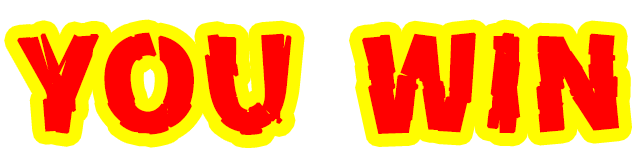
<style>
.page{position:relative;width:642px;height:156px;background:#ffffff}
.page>*{position:absolute;margin:0}
.t1{font:125px "ZeroGothic";color:#ff0000;font-weight:bold}
</style>
<div class="page">
<p class="t1" style="left:17px;top:32px;width:275px;height:103px">YOU</p>
<p class="t1" style="left:362px;top:32px;width:257px;height:102px">WIN</p>
</div>
